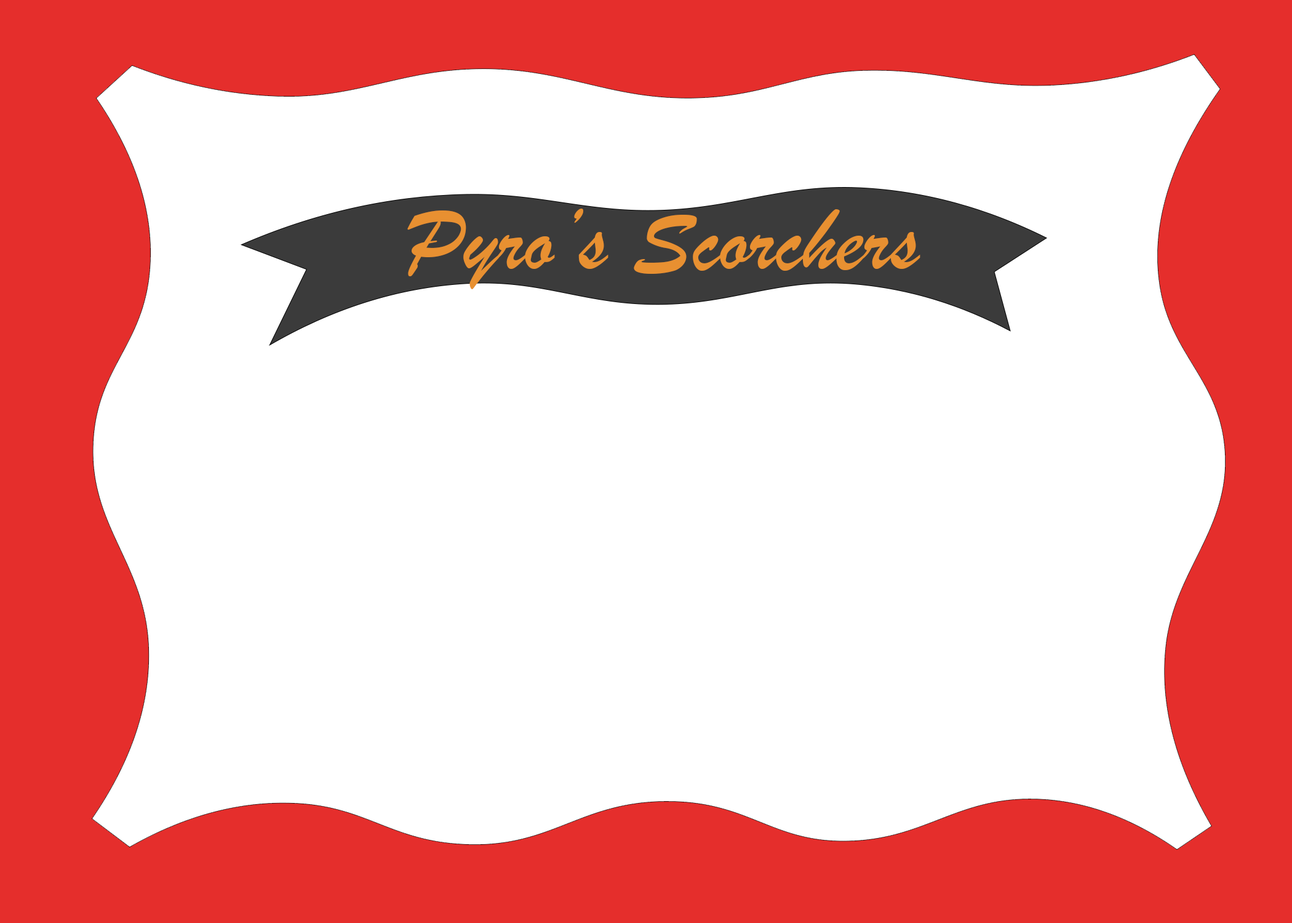
<style>
.page{position:relative;width:1292px;height:923px;background:#ffffff}
.page>*{position:absolute;margin:0}
.t1{font:92.3px "BrushScriptMT";color:#e89031}
</style>
<div class="page">
<p class="t1" style="left:407px;top:209px;width:513px;height:80px">Pyro’s Scorchers</p>
</div>
